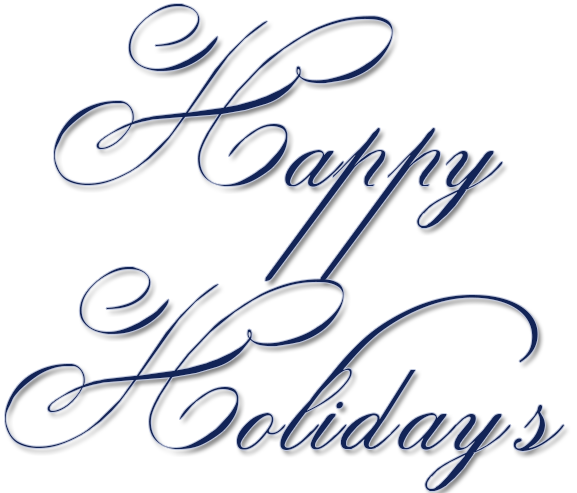
<style>
.page{position:relative;width:577px;height:493px;background:#ffffff}
.page>*{position:absolute;margin:0}
.t1{font:243px/263px "IndentureEnglishPenmanDemo";letter-spacing:0.02em;color:#122457}
</style>
<div class="page">
<p class="t1" style="left:5px;top:4px;width:559px;height:487px;text-align:center">Happy<br>Holidays</p>
</div>
